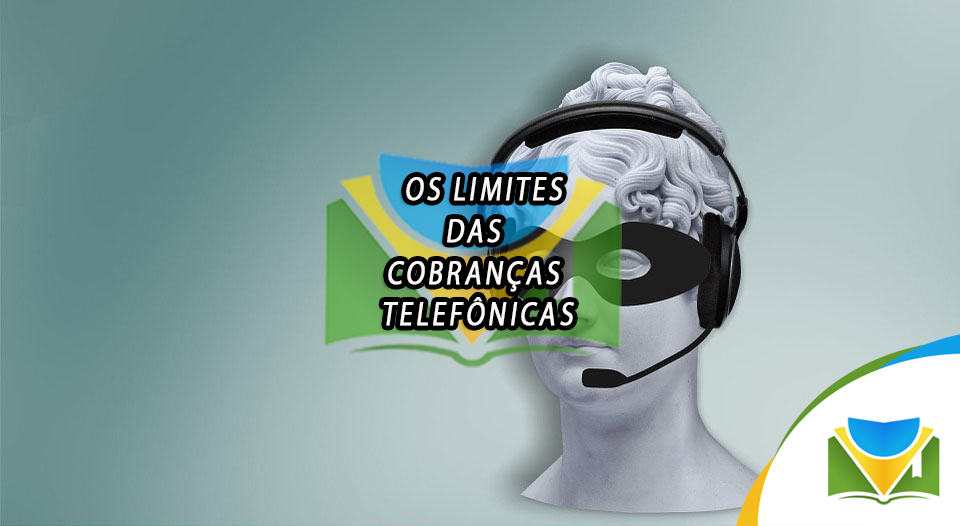
<style>
.page{position:relative;width:960px;height:526px}
.page>*{position:absolute;margin:0}
.t1{font:33.8px/20.8px "MyriadPro-Regular";letter-spacing:0.1em;color:#fdf8f8;text-transform:uppercase;font-weight:bold;font-style:italic;scale:0.78 1}
</style>
<div class="page">
<p class="t1" style="left:383px;top:177px;width:191px;height:149px;text-align:center">OS LIMITES <br><br>DAS <br><br>COBRANÇAS<br><br> TELEFÔNICAS</p>
</div>
